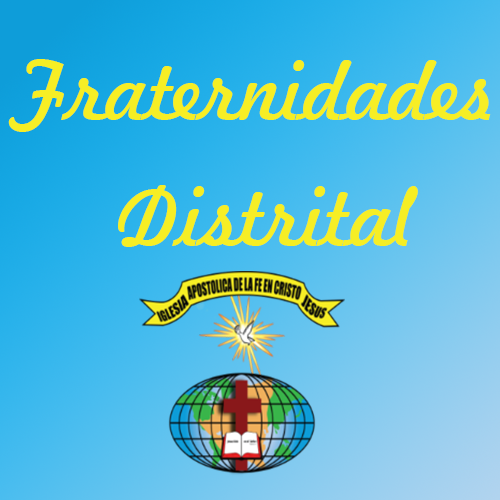
<style>
.page{position:relative;width:500px;height:500px}
.page>*{position:absolute;margin:0}
.t1{font:78.3px/125.7px "Freehand521BT-RegularC";color:#f6ee25}
</style>
<div class="page">
<p class="t1" style="left:8px;top:59px;width:483px;height:188px;text-align:center">Fraternidades <br>Distrital</p>
</div>
